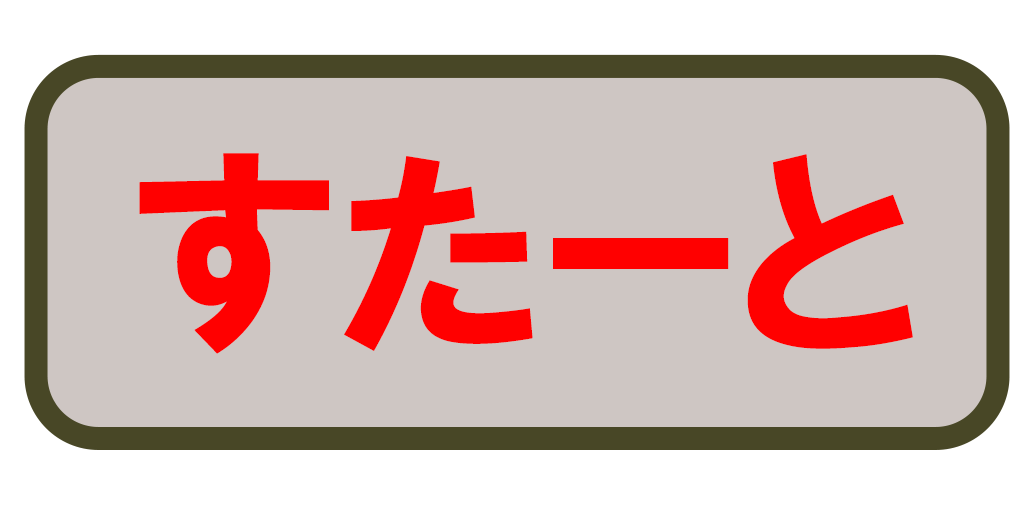
<style>
.page{position:relative;width:1024px;height:512px;background:#cec6c3}
.page>*{position:absolute;margin:0}
.t1{font:230.7px "HGPSoeiKakugothicUB";color:#ff0000}
</style>
<div class="page">
<p class="t1" style="left:139px;top:153px;width:774px;height:201px">すたーと</p>
</div>
